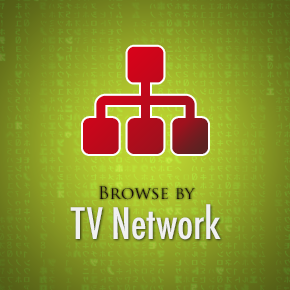
<style>
.page{position:relative;width:290px;height:290px}
.page>*{position:absolute;margin:0}
.t1{font:17px "TrajanPro-Regular";color:#1a0c0c}
.t2{font:42px "Futura-CondensedMedium";color:#f0f0f0}
</style>
<div class="page">
<p class="t1" style="left:99px;top:186px;width:96px;height:14px">Browse by</p>
<p class="t2" style="left:70px;top:204px;width:151px;height:36px">TV Network</p>
</div>
